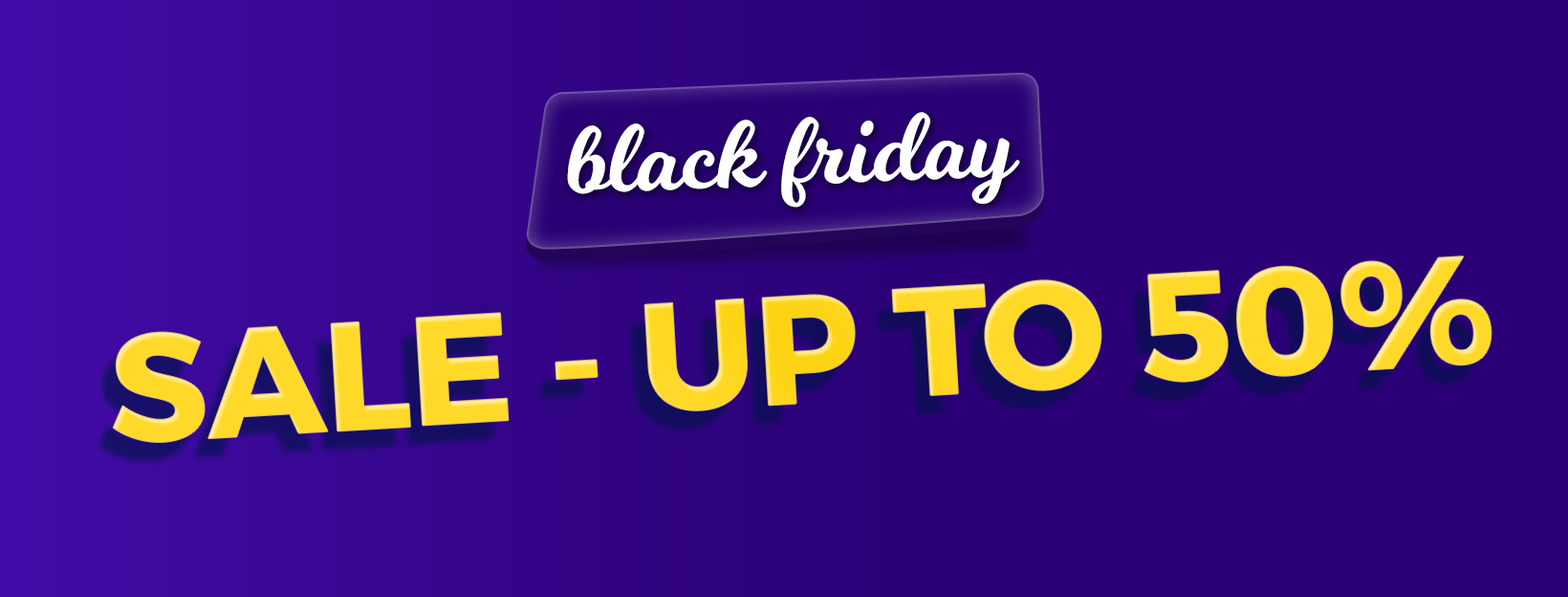
<style>
.page{position:relative;width:1568px;height:597px;background:#2b0076}
.page>*{position:absolute;margin:0}
.t1{font:95.6px "Milkshake";color:#ffffff}
.t2{font:153px "Montserrat-Bold";color:#ffd71d;text-transform:uppercase}
</style>
<div class="page">
<p class="t1" style="left:567px;top:112px;width:453px;height:95px;rotate:-2deg">black friday</p>
<p class="t2" style="left:113px;top:256px;width:1379px;height:186px;rotate:-3deg">Sale - Up to 50%</p>
</div>
